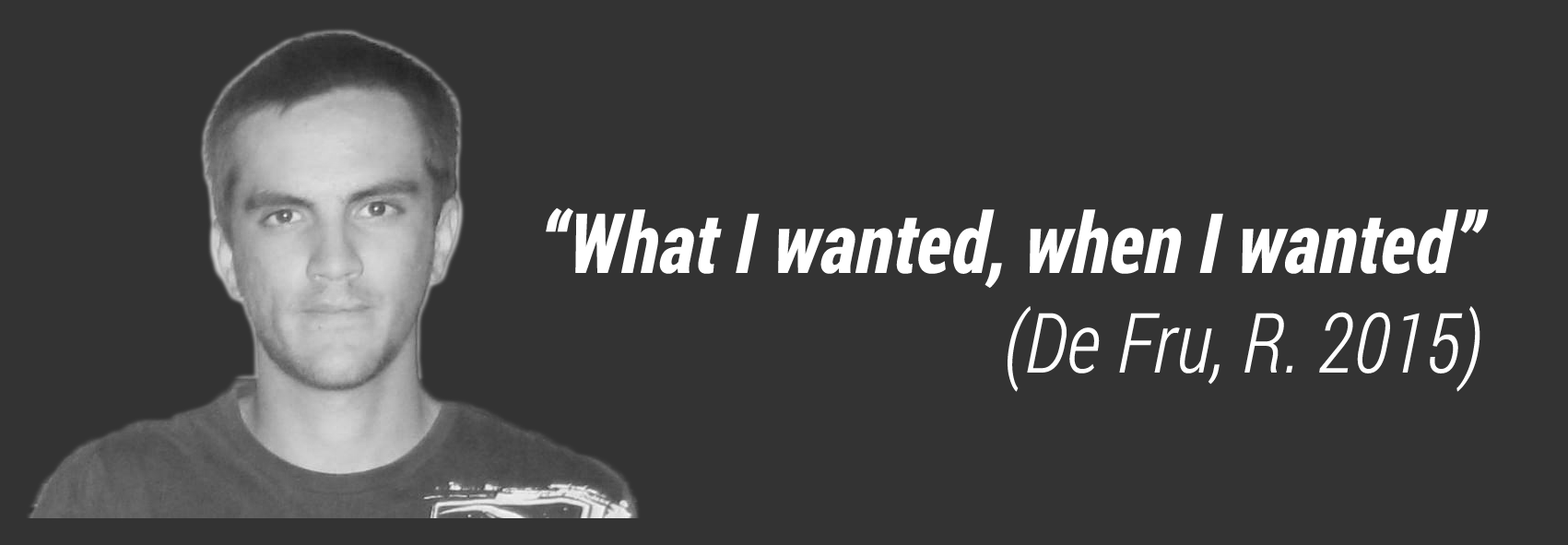
<style>
.page{position:relative;width:1568px;height:545px;background:#333333}
.page>*{position:absolute;margin:0}
.t1{font:83px "RobotoCondensed-BoldItalic";color:#ffffff}
.t2{font:83px "RobotoCondensed-LightItalic";color:#ffffff}
</style>
<div class="page">
<p class="t1" style="left:546px;top:207px;width:943px;height:185px;text-align:right">“What I wanted, when I wanted”<br><span class="t2">(De Fru, R. 2015)</span></p>
</div>
